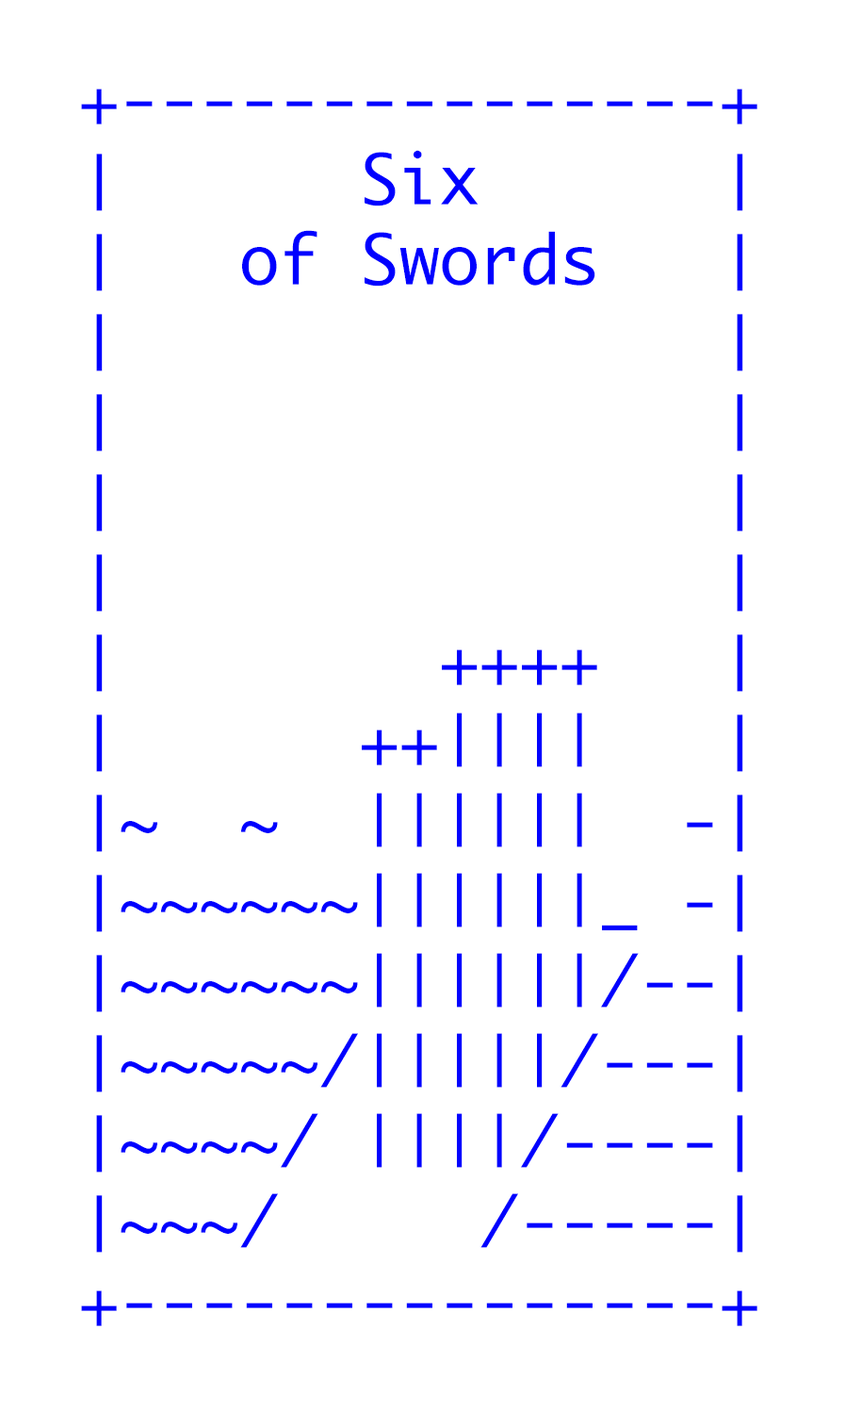
<style>
.page{position:relative;width:845px;height:1411px;background:#ffffff}
.page>*{position:absolute;margin:0}
.t1{font:66.7px "Monaco";color:#0000ff}
</style>
<div class="page">
<p class="t1" style="left:81px;top:89px;width:677px;height:1237px">+---------------+<br>│      Six      │<br>│   of Swords   │<br>│               │<br>│               │<br>│               │<br>│               │<br>│        ++++   │ <br>│      ++||||   │<br>│~  ~  ||||||  -│<br>│~~~~~~||||||_ -│<br>│~~~~~~||||||/--│<br>│~~~~~/|||||/---│<br>│~~~~/ ||||/----│<br>│~~~/     /-----│<br>+---------------+</p>
</div>
